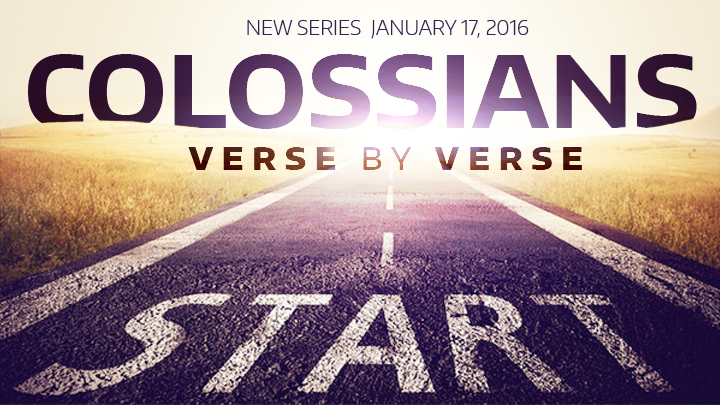
<style>
.page{position:relative;width:720px;height:405px}
.page>*{position:absolute;margin:0}
.t1{font:19px "EncodeSansWide-ExtraLight";color:#342050;text-transform:uppercase}
.t2{font:30.8px "EncodeSansWide-ExtraBold";letter-spacing:0.28em;text-transform:uppercase}
.t3{font:30.8px "EncodeSansWide-Medium";letter-spacing:0.28em;text-transform:uppercase}
</style>
<div class="page">
<p class="t1" style="left:247px;top:20px;width:282px;height:19px">New series  january 17, 2016</p>
<p class="t2" style="left:188px;top:147px;width:394px;height:23px">Verse <span class="t3">by</span> verse</p>
</div>
